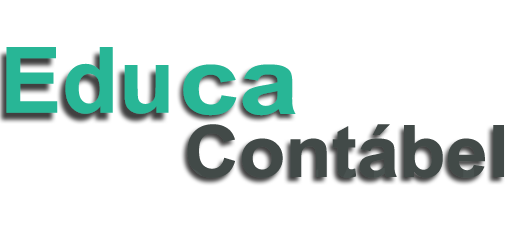
<style>
.page{position:relative;width:520px;height:240px;background:#ffffff}
.page>*{position:absolute;margin:0}
.t1{font:91.5px "Arial-BoldMT";color:#28b696}
.t2{font:93.2px "Arial-BoldMT";color:#28b696;scale:1.16 1}
.t3{font:72.1px "Arial-BoldMT";color:#495250;scale:1.05 1}
</style>
<div class="page">
<p class="t1" style="left:6px;top:47px;width:163px;height:67px">Edu</p>
<p class="t2" style="left:183px;top:64px;width:113px;height:52px">ca</p>
<p class="t3" style="left:187px;top:124px;width:317px;height:54px">Contábel</p>
</div>
